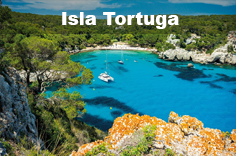
<style>
.page{position:relative;width:236px;height:156px}
.page>*{position:absolute;margin:0}
.t1{font:18px "Arial-Black";color:#ffffff}
</style>
<div class="page">
<p class="t1" style="left:62px;top:12px;width:117px;height:17px">Isla Tortuga</p>
</div>
